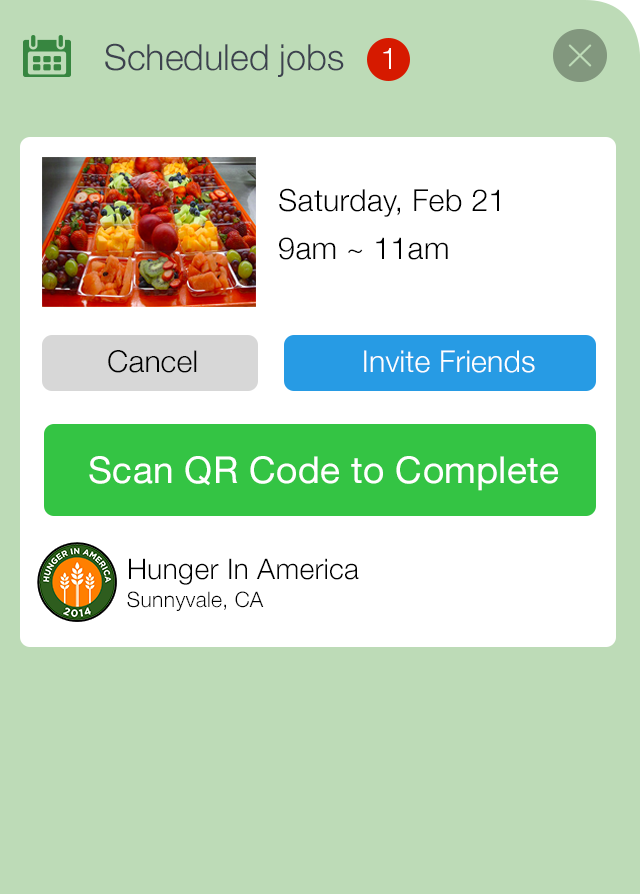
<style>
.page{position:relative;width:640px;height:894px;background:#bddbb7}
.page>*{position:absolute;margin:0}
.t1{font:36px "HelveticaNeue-Light";color:#3d424f}
.t2{font:30px "HelveticaNeue-Light";color:#ffffff}
.t3{font:30.4px "HelveticaNeue-Light";letter-spacing:0.01em;color:#000000}
.t4{font:30px "HelveticaNeue-Light";letter-spacing:0.01em;color:#000000}
.t5{font:30px "HelveticaNeue-Light";letter-spacing:0.01em;color:#ffffff}
.t6{font:37px "HelveticaNeue";letter-spacing:0.01em;color:#ffffff}
.t7{font:28.5px "HelveticaNeue-Light";letter-spacing:0.01em;color:#000000}
.t8{font:21.3px "HelveticaNeue-Light";letter-spacing:0.01em;color:#000000}
</style>
<div class="page">
<p class="t1" style="left:105px;top:43px;width:239px;height:34px">Scheduled jobs</p>
<p class="t2" style="left:383px;top:48px;width:8px;height:21px">1</p>
<p class="t3" style="left:279px;top:188px;width:220px;height:29px">Saturday, Feb 21</p>
<p class="t3" style="left:279px;top:237px;width:169px;height:23px">9am ~ 11am</p>
<p class="t4" style="left:108px;top:350px;width:89px;height:23px">Cancel</p>
<p class="t5" style="left:364px;top:350px;width:171px;height:23px">Invite Friends</p>
<p class="t6" style="left:89px;top:456px;width:469px;height:35px">Scan QR Code to Complete</p>
<p class="t7" style="left:129px;top:558px;width:230px;height:27px">Hunger In America</p>
<p class="t8" style="left:127px;top:591px;width:137px;height:20px">Sunnyvale, CA</p>
</div>
